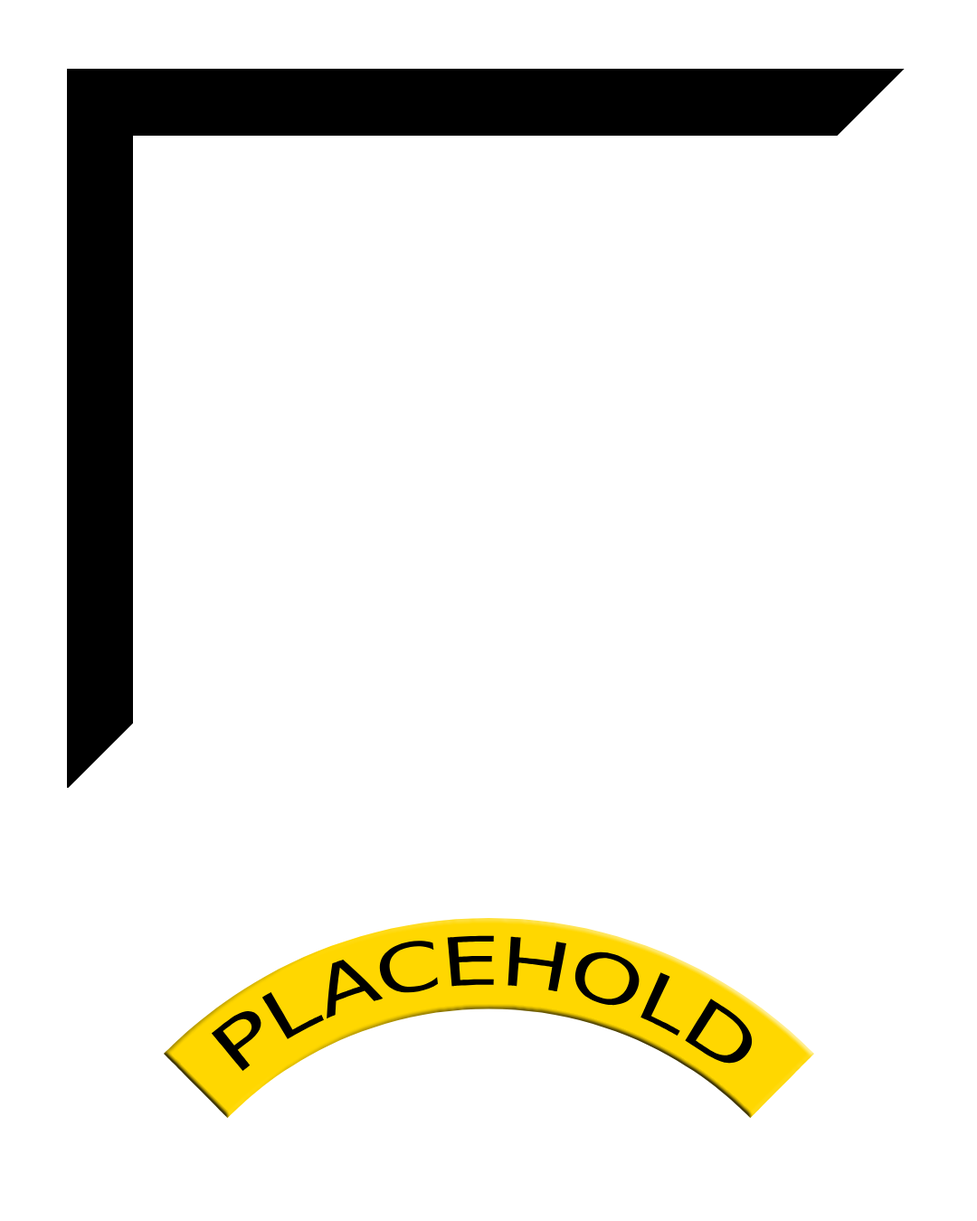
<style>
.page{position:relative;width:977px;height:1221px;background:#ffffff}
.page>*{position:absolute;margin:0}
.t1{font:66.9px "DejaVuSans";color:#000000}
</style>
<div class="page">
<p class="t1" style="left:211px;top:935px;width:541px;height:137px;text-align:center">PLACEHOLD</p>
</div>
